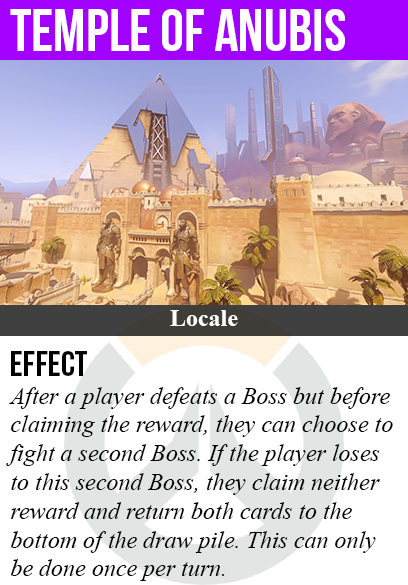
<style>
.page{position:relative;width:408px;height:585px;background:#ffffff}
.page>*{position:absolute;margin:0}
.t1{font:60px "BebasNeue";color:#ffffff}
.t2{font:24px "TimesNewRomanPS-BoldMT";color:#ffffff}
.t3{font:36px "BebasNeue";color:#000000}
.t4{font:24px "TimesNewRomanPS-ItalicMT";color:#000000}
</style>
<div class="page">
<p class="t1" style="left:10px;top:9px;width:335px;height:42px">temple of anubis</p>
<p class="t2" style="left:170px;top:310px;width:68px;height:16px">Locale</p>
<p class="t3" style="left:11px;top:351px;width:76px;height:25px">Effect</p>
<p class="t4" style="left:6px;top:387px;width:387px;height:194px">After a player defeats a Boss but before<br>claiming the reward, they can choose to<br>fight a second Boss. If the player loses<br>to this second Boss, they claim neither<br>reward and return both cards to the<br>bottom of the draw pile. This can only<br>be done once per turn.</p>
</div>
